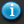
<style>
.page{position:relative;width:24px;height:24px;background:#333333}
.page>*{position:absolute;margin:0}
.t1{font:19.2px "CreditValley";letter-spacing:0.005em;color:#fafbfc;scale:1.25 1}
</style>
<div class="page">
<p class="t1" style="left:10px;top:3px;width:5px;height:13px">i</p>
</div>
